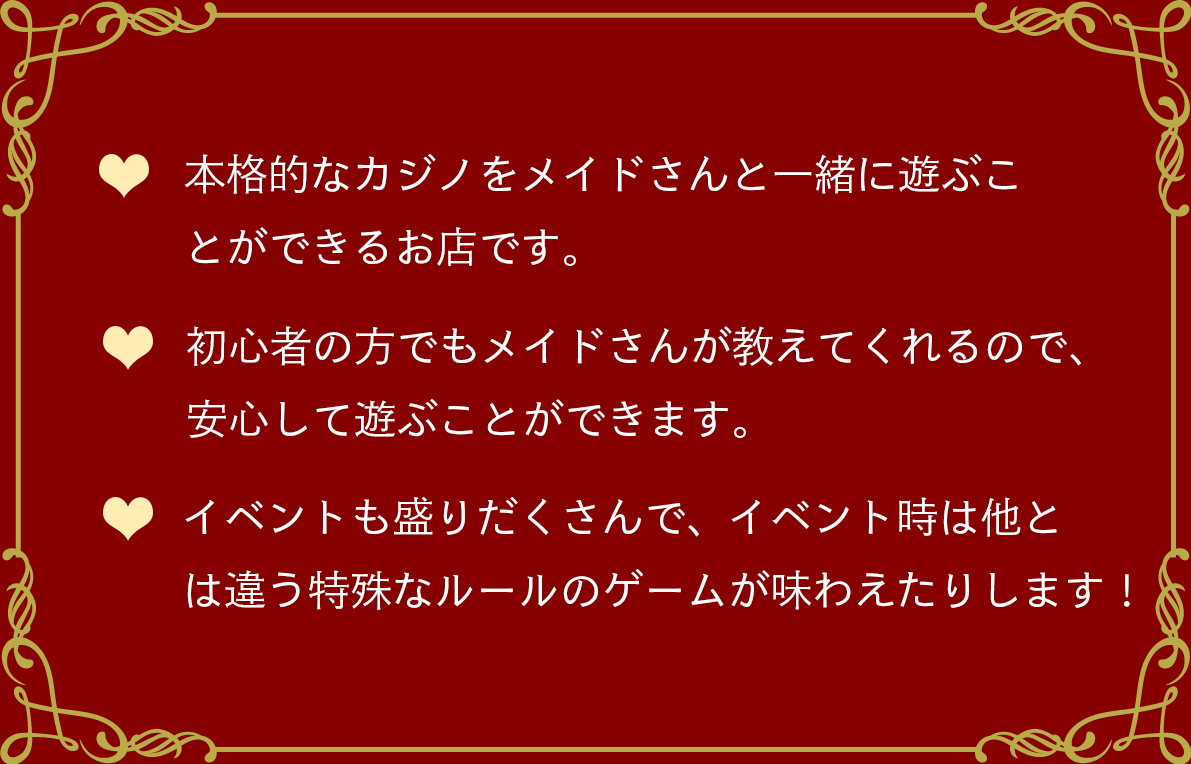
<style>
.page{position:relative;width:1191px;height:764px;background:#860000}
.page>*{position:absolute;margin:0}
.t1{font:42px "ToppanBunkyuGothicPr6N-Regular";color:#ffffff}
.t2{font:42px "ToppanBunkyuGothicPr6N-Regular";color:#fffefe}
</style>
<div class="page">
<p class="t1" style="left:184px;top:154px;width:833px;height:112px">本格的なカジノをメイドさんと一緒に遊ぶこ<br>とができるお店です。</p>
<p class="t1" style="left:187px;top:326px;width:894px;height:112px">初心者の方でもメイドさんが教えてくれるので、<br>安心して遊ぶことができます。</p>
<p class="t2" style="left:185px;top:497px;width:945px;height:113px">イベントも盛りだくさんで、イベント時は他と<br>は違う特殊なルールのゲームが味わえたりします！</p>
</div>
